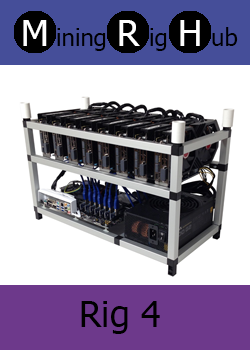
<style>
.page{position:relative;width:250px;height:350px;background:#ffffff}
.page>*{position:absolute;margin:0}
.t1{font:36px "Tahoma";color:#ffffff}
.t2{font:24px "Tahoma";color:#000000}
.t3{font:36px "Tahoma";color:#000000}
</style>
<div class="page">
<p class="t1" style="left:23px;top:20px;width:24px;height:26px">M</p>
<p class="t2" style="left:57px;top:28px;width:49px;height:23px">ining</p>
<p class="t1" style="left:119px;top:20px;width:21px;height:26px">R</p>
<p class="t2" style="left:150px;top:28px;width:17px;height:23px">ig</p>
<p class="t1" style="left:180px;top:20px;width:20px;height:26px">H</p>
<p class="t2" style="left:212px;top:27px;width:26px;height:19px">ub</p>
<p class="t3" style="left:81px;top:301px;width:79px;height:33px">Rig 4</p>
</div>
